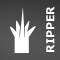
<style>
.page{position:relative;width:60px;height:60px}
.page>*{position:absolute;margin:0}
.t1{font:11px "Verdana-Bold";color:#ffffff}
</style>
<div class="page">
<p class="t1" style="left:46px;top:6px;width:9px;height:46px;rotate:-90deg">RIPPER</p>
</div>
